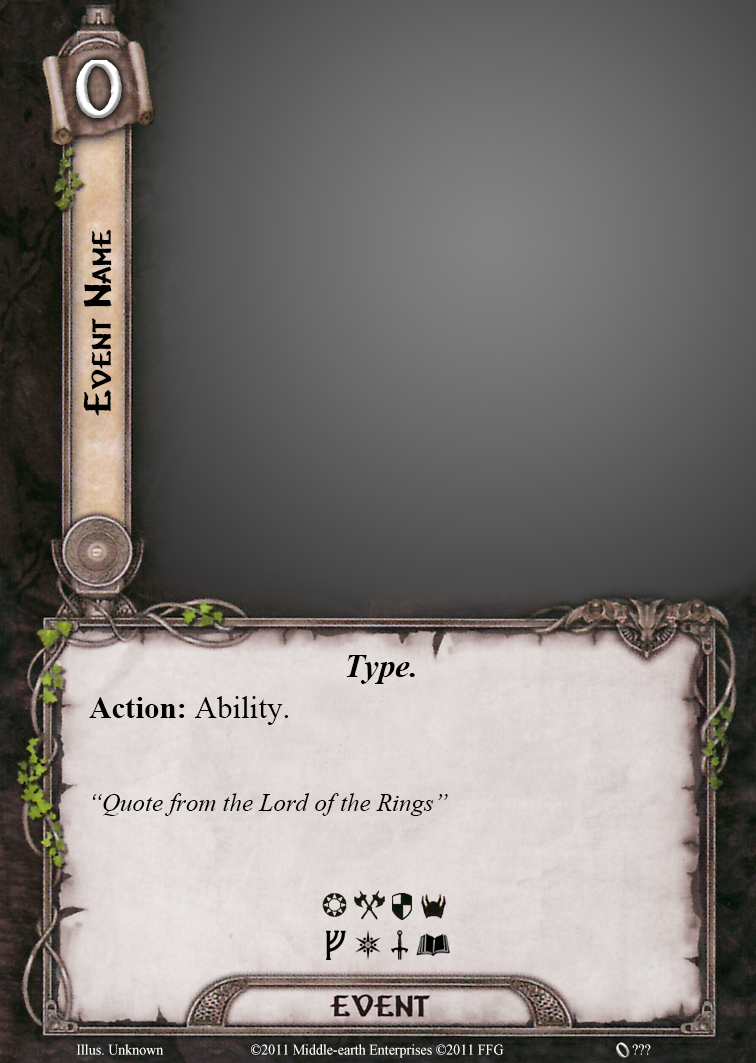
<style>
.page{position:relative;width:756px;height:1063px}
.page>*{position:absolute;margin:0}
.t1{font:79.2px "Vafthrudnir";font-variant:small-caps}
.t2{font:37.5px "Vafthrudnir";letter-spacing:-0.002em;color:#000000;font-variant:small-caps}
.t3{font:33.3px "TimesNewRomanPS-BoldItalicMT";color:#000000}
.t4{font:31.2px "TimesNewRomanPSMT";color:#000000}
.t5{font:31.2px "TimesNewRomanPS-BoldMT";color:#000000}
.t6{font:25px "TimesNewRomanPS-ItalicMT";color:#000000}
.t7{font:14.6px "TimesNewRomanPSMT";color:#ffffff;scale:0.96 1}
</style>
<div class="page">
<p class="t1" style="left:76px;top:60px;width:46px;height:58px">0</p>
<p class="t2" style="left:83px;top:229px;width:29px;height:187px;rotate:-90deg">Event Name</p>
<p class="t3" style="left:346px;top:655px;width:69px;height:29px">Type.</p>
<p class="t4" style="left:89px;top:696px;width:199px;height:29px"><span class="t5">Action: </span>Ability.</p>
<p class="t6" style="left:92px;top:793px;width:356px;height:23px">“Quote from the Lord of the Rings”</p>
<p class="t7" style="left:76px;top:1044px;width:88px;height:11px">Illus. Unknown</p>
<p class="t7" style="left:251px;top:1044px;width:253px;height:14px">©2011 Middle-earth Enterprises ©2011 FFG</p>
<p class="t7" style="left:632px;top:1044px;width:19px;height:11px">???</p>
</div>
